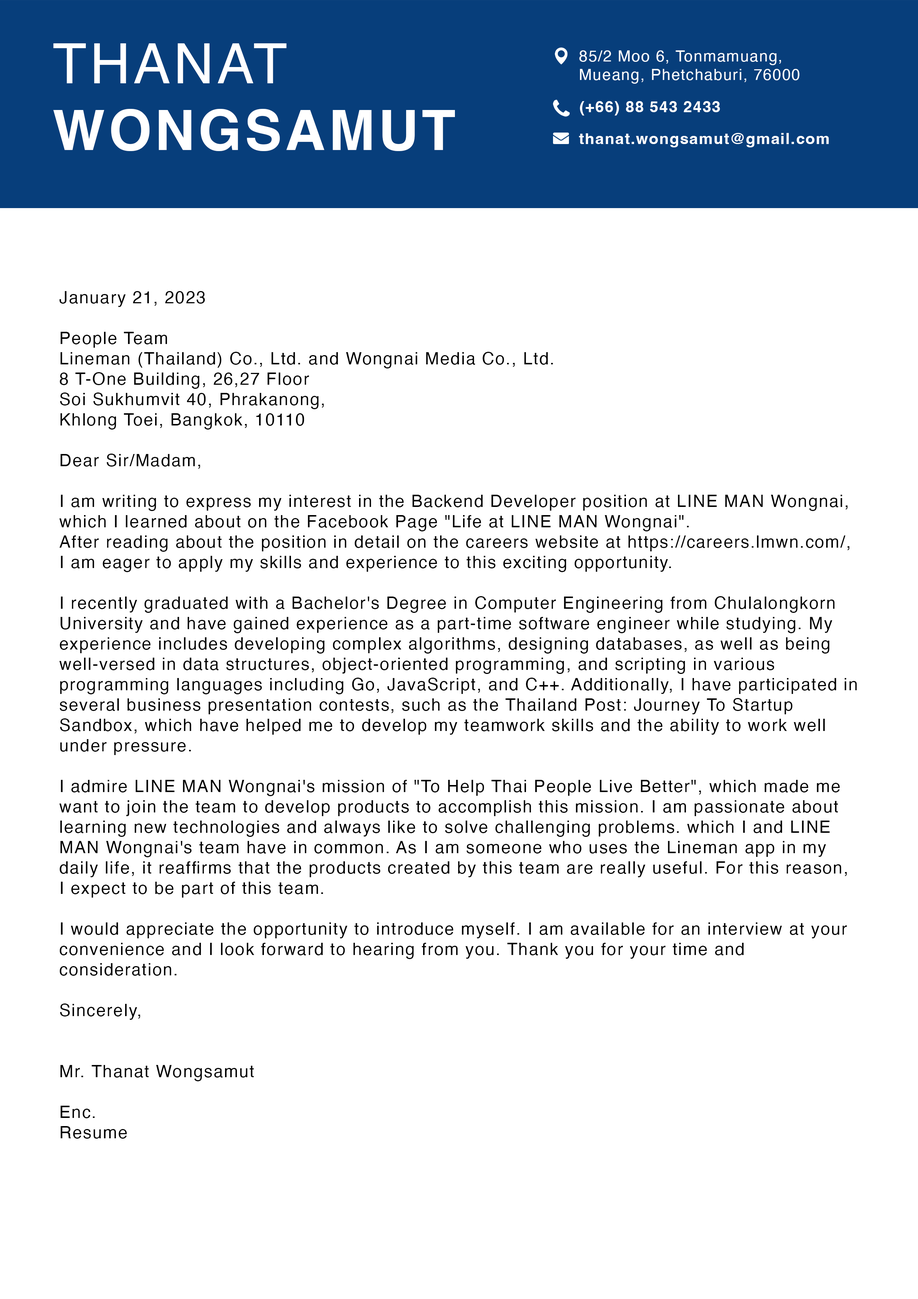
<style>
.page{position:relative;width:918px;height:1299px;background:#ffffff}
.page>*{position:absolute;margin:0}
.t1{font:55.5px "Helvetica-Bold";letter-spacing:0.06em;color:#ffffff}
.t2{font:55.5px "Helvetica";letter-spacing:0.06em;color:#ffffff}
.t3{font:15.4px "Helvetica";letter-spacing:0.06em;color:#ffffff}
.t4{font:15.4px "Helvetica-Bold";letter-spacing:0.06em;color:#ffffff}
.t5{font:17px "Helvetica";letter-spacing:0.06em;color:#000000}
</style>
<div class="page">
<p class="t1" style="left:53px;top:43px;width:402px;height:108px"><span class="t2">THANAT<br></span>WONGSAMUT</p>
<p class="t3" style="left:579px;top:50px;width:221px;height:34px">85/2 Moo 6, Tonmamuang,<br>Mueang, Phetchaburi, 76000</p>
<p class="t4" style="left:580px;top:101px;width:140px;height:15px">(+66) 88 543 2433</p>
<p class="t4" style="left:579px;top:133px;width:250px;height:14px">thanat.wongsamut@gmail.com</p>
<p class="t5" style="left:59px;top:291px;width:798px;height:847px">January 21, 2023<br><br>People Team<br>Lineman (Thailand) Co., Ltd. and Wongnai Media Co., Ltd.<br>8 T-One Building, 26,27 Floor<br>Soi Sukhumvit 40, Phrakanong,<br>Khlong Toei, Bangkok, 10110<br><br>Dear Sir/Madam,<br><br>I am writing to express my interest in the Backend Developer position at LINE MAN Wongnai, which I learned about on the Facebook Page "Life at LINE MAN Wongnai". <br>After reading about the position in detail on the careers website at https://careers.lmwn.com/,<br>I am eager to apply my skills and experience to this exciting opportunity.<br><br>I recently graduated with a Bachelor's Degree in Computer Engineering from Chulalongkorn University and have gained experience as a part-time software engineer while studying. My experience includes developing complex algorithms, designing databases, as well as being well-versed in data structures, object-oriented programming, and scripting in various programming languages including Go, JavaScript, and C++. Additionally, I have participated in several business presentation contests, such as the Thailand Post: Journey To Startup Sandbox, which have helped me to develop my teamwork skills and the ability to work well under pressure.<br><br>I admire LINE MAN Wongnai's mission of "To Help Thai People Live Better", which made me want to join the team to develop products to accomplish this mission. I am passionate about learning new technologies and always like to solve challenging problems. which I and LINE MAN Wongnai's team have in common. As I am someone who uses the Lineman app in my daily life, it reaffirms that the products created by this team are really useful. For this reason, I expect to be part of this team.<br><br>I would appreciate the opportunity to introduce myself. I am available for an interview at your convenience and I look forward to hearing from you. Thank you for your time and consideration.<br><br>Sincerely,<br><br><br>Mr. Thanat Wongsamut<br><br>Enc.<br>Resume</p>
</div>
